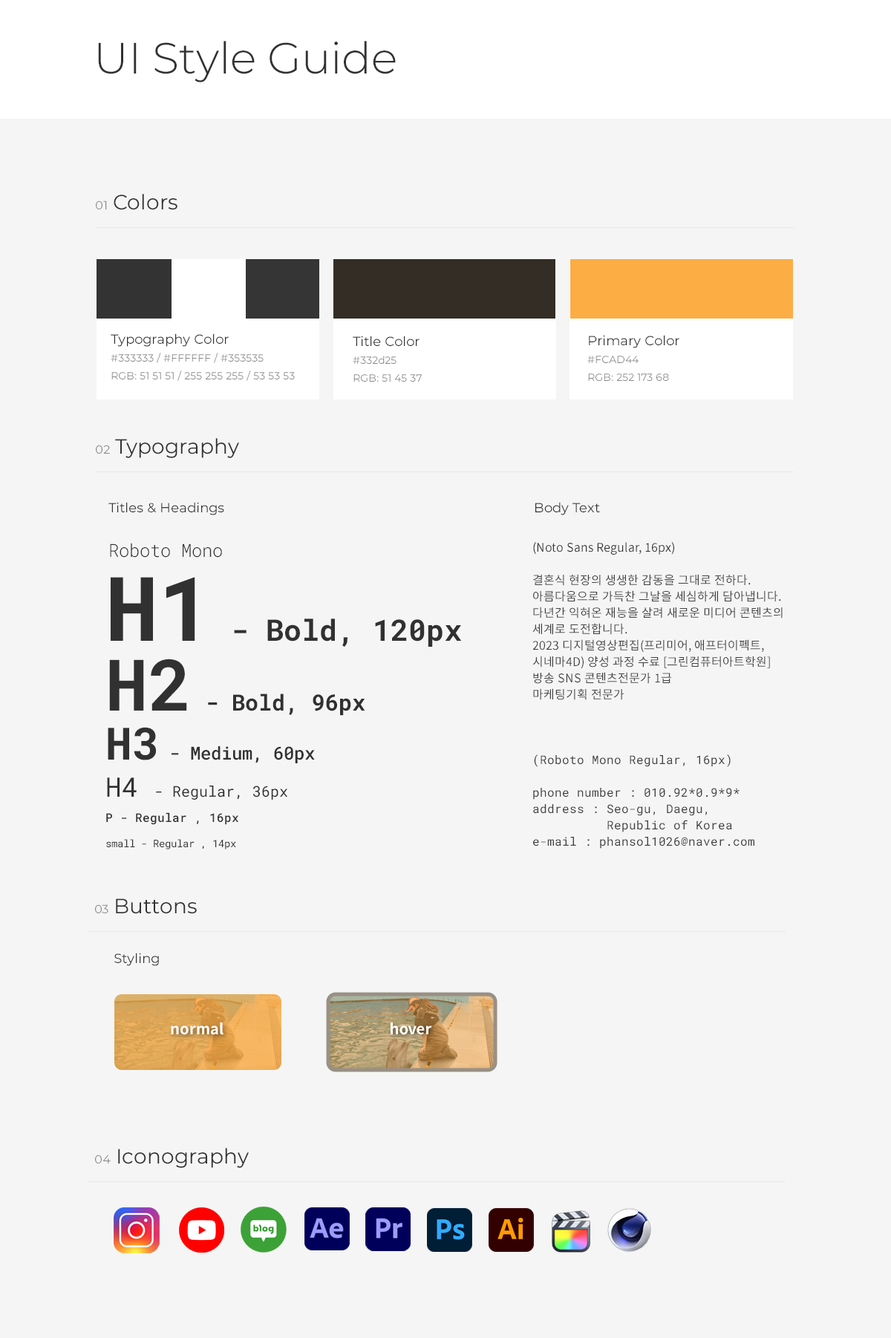
<style>
.page{position:relative;width:891px;height:1338px;background:#f5f5f5}
.page>*{position:absolute;margin:0}
.t1{font:43.8px "Montserrat-Light";color:#313131}
.t2{font:20.8px "Montserrat-Regular";color:#313131}
.t3{font:11.9px "Montserrat-Regular";color:#888888}
.t4{font:10.4px/17.8px "Montserrat-Regular";color:#888888}
.t5{font:13.4px/17.8px "Montserrat-Regular";color:#313131}
.t6{font:13.4px "Montserrat-Regular";color:#313131}
.t7{font:17.8px "RobotoMono-Light";color:#313131}
.t8{font:11.9px/16.3px "NotoSansKR-Regular";color:#414042}
.t9{font:11.9px/0px "NotoSansKR-Regular";color:#313131}
.t10{font:11.9px/16.3px "RobotoMono-Regular";color:#414042}
.t11{font:11.9px/16.3px "RobotoMono-Bold";color:#414042}
.t12{font:11.9px/16.3px "RobotoMono-Medium";color:#414042}
.t13{font:10.4px/25.2px "RobotoMono-Regular";color:#313131}
.t14{font:89.1px/69.1px "RobotoMono-Bold";color:#313131}
.t15{font:29.7px/69.1px "RobotoMono-Bold";color:#313131}
.t16{font:71.3px/69.8px "RobotoMono-Bold";color:#313131}
.t17{font:22.3px/69.8px "RobotoMono-Bold";color:#313131}
.t18{font:44.6px/49px "RobotoMono-Bold";color:#313131}
.t19{font:17.8px/49px "RobotoMono-Medium";color:#313131}
.t20{font:26.7px/37.1px "RobotoMono-Regular";color:#313131}
.t21{font:14.9px/37.1px "RobotoMono-Regular";color:#313131}
.t22{font:11.9px/25.2px "RobotoMono-Medium";color:#313131}
.t23{font:14.9px "NotoSansKR-Bold";color:#fffffe}
</style>
<div class="page">
<p class="t1" style="left:98px;top:41px;width:298px;height:41px">UI Style Guide</p>
<p class="t2" style="left:96px;top:194px;width:81px;height:16px"><span class="t3">01 </span>Colors</p>
<p class="t4" style="left:111px;top:333px;width:184px;height:48px"><span class="t5">Typography Color</span><br>#333333 / #FFFFFF / #353535<br>RGB: 51 51 51 / 255 255 255 / 53 53 53</p>
<p class="t4" style="left:353px;top:336px;width:69px;height:46px"><span class="t5">Title Color<br></span>#332d25<br>RGB: 51 45 37</p>
<p class="t4" style="left:587px;top:335px;width:92px;height:46px"><span class="t5">Primary Color<br></span>#FCAD44<br>RGB: 252 173 68</p>
<p class="t2" style="left:96px;top:438px;width:143px;height:20px"><span class="t3">02 </span>Typography</p>
<p class="t6" style="left:108px;top:502px;width:116px;height:13px">Titles &amp; Headings</p>
<p class="t6" style="left:535px;top:502px;width:65px;height:13px">Body Text</p>
<p class="t7" style="left:110px;top:543px;width:112px;height:15px">Roboto Mono</p>
<p class="t8" style="left:532px;top:542px;width:251px;height:307px"><span class="t9">(Noto Sans Regular, 16px)<br><br></span>결혼식 현장의 생생한 감동을 그대로 전하다.<br>아름다움으로 가득찬 그날을 세심하게 담아냅니다.<br>다년간 익혀온 재능을 살려 새로운 미디어 콘텐츠의<br>세계로 도전합니다. <br>2023 디지털영상편집(프리미어, 애프터이펙트,<br>시네마4D) 양성 과정 수료 [그린컴퓨터아트학원]<br>방송 SNS 콘텐츠전문가 1급<br>마케팅기획 전문가<br><br><br><br><span class="t10">(Roboto Mono Regular, 16px)<br><br></span><span class="t11">phone number</span><span class="t12"> : </span><span class="t10">010.92*0.9*9*<br></span><span class="t11">address</span><span class="t12"> : </span><span class="t10">Seo-gu, Daegu,<br>          Republic of Korea<br></span><span class="t11">e-mail</span><span class="t12"> : </span><span class="t10">phansol1026@naver.com</span></p>
<p class="t13" style="left:106px;top:577px;width:356px;height:273px"><span class="t14">H1</span><span class="t15"> - Bold, 120px<br></span><span class="t16">H2</span><span class="t17"> - Bold, 96px<br></span><span class="t18">H3 </span><span class="t19">- Medium, 60px<br></span><span class="t20">H4 </span><span class="t21">- Regular, 36px<br></span><span class="t22">P - Regular , 16px<br></span>small - Regular , 14px</p>
<p class="t2" style="left:95px;top:899px;width:102px;height:15px"><span class="t3">03 </span>Buttons</p>
<p class="t6" style="left:114px;top:953px;width:45px;height:13px">Styling</p>
<p class="t23" style="left:171px;top:1023px;width:53px;height:12px">normal</p>
<p class="t23" style="left:391px;top:1023px;width:41px;height:12px">hover</p>
<p class="t2" style="left:95px;top:1148px;width:154px;height:20px"><span class="t3">04 </span>Iconography</p>
</div>
